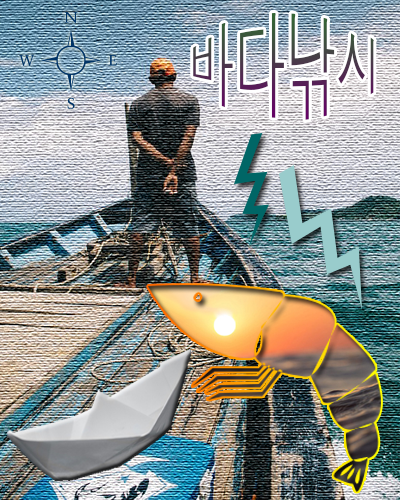
<style>
.page{position:relative;width:400px;height:500px}
.page>*{position:absolute;margin:0}
.t1{font:47.9px "Dotum"}
</style>
<div class="page">
<p class="t1" style="left:193px;top:13px;width:181px;height:107px">바다낚시</p>
</div>
